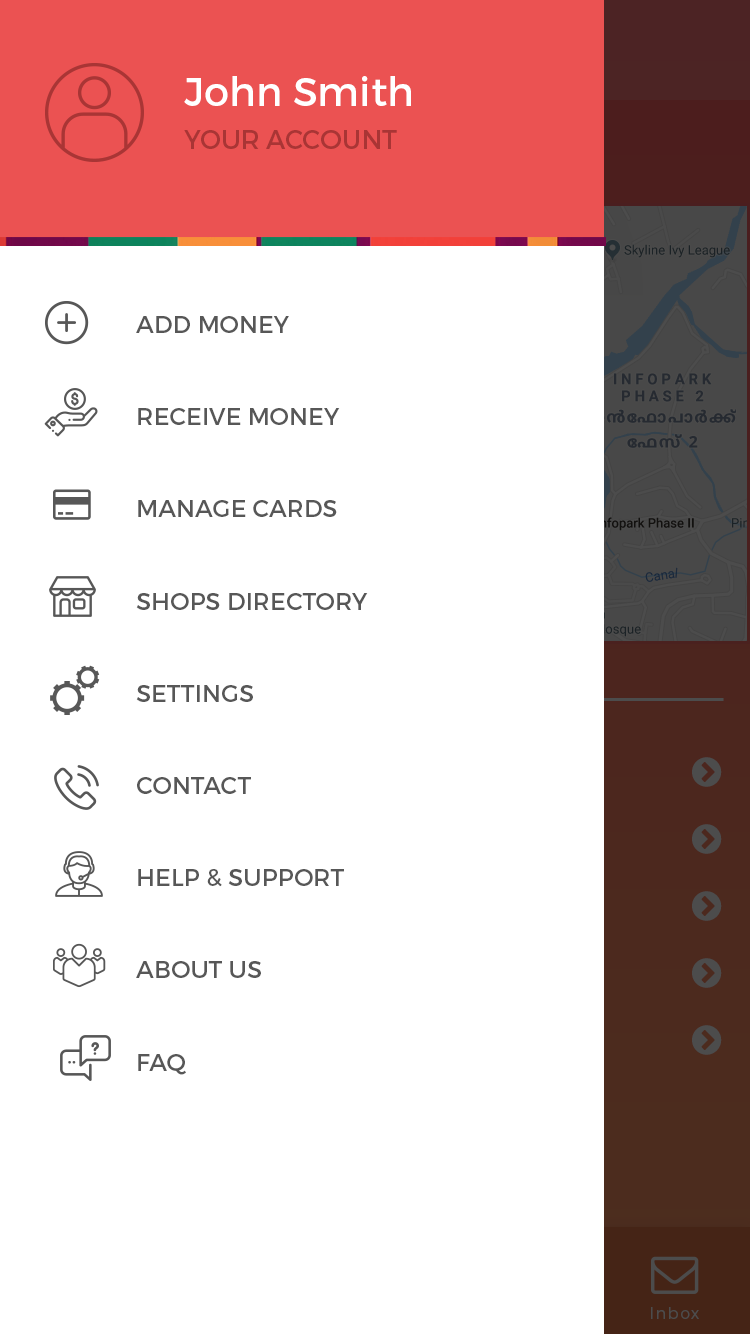
<style>
.page{position:relative;width:750px;height:1334px;background:#ffffff}
.page>*{position:absolute;margin:0}
.t1{font:40px "Montserrat-Regular";color:#ffffff}
.t2{font:26px "Montserrat-Regular";color:#a93535;text-transform:uppercase}
.t3{font:24px/92.2px "Montserrat-Regular";color:#575757;text-transform:uppercase}
.t4{font:16px "Montserrat-Light";letter-spacing:0.1em;color:#4c4c4c}
</style>
<div class="page">
<p class="t1" style="left:184px;top:76px;width:227px;height:30px">John Smith</p>
<p class="t2" style="left:184px;top:130px;width:213px;height:19px">Your account</p>
<p class="t3" style="left:136px;top:316px;width:232px;height:759px">Add Money<br>Receive Money<br>Manage Cards<br>Shops Directory<br>Settings<br>Contact<br>Help &amp; Support<br>About Us<br>Faq</p>
<p class="t4" style="left:651px;top:1307px;width:48px;height:12px">Inbox</p>
</div>
